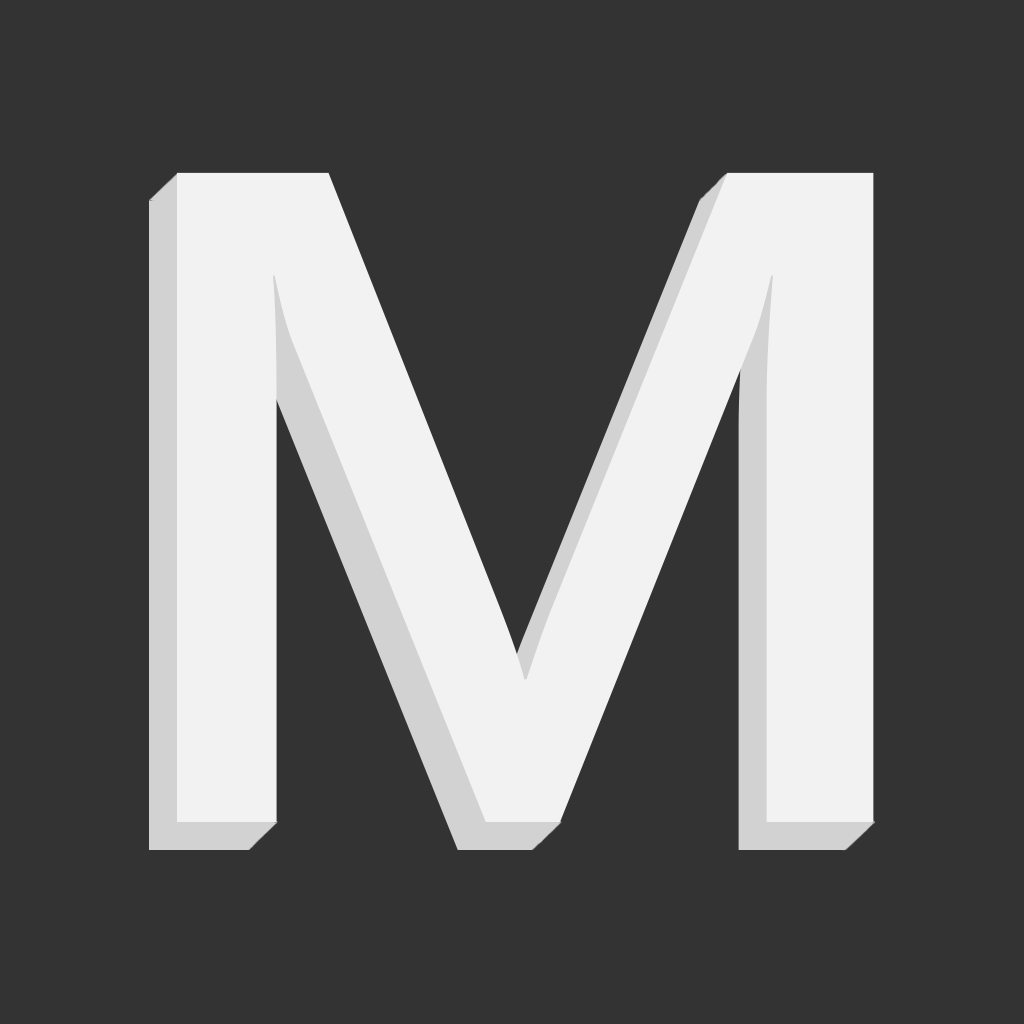
<style>
.page{position:relative;width:1024px;height:1024px;background:#333333}
.page>*{position:absolute;margin:0}
.t1{font:927.2px "SegoeUI-Semibold";letter-spacing:0.004em;color:#f2f2f2}
</style>
<div class="page">
<p class="t1" style="left:177px;top:172px;width:697px;height:650px">M</p>
<p class="t1" style="left:149px;top:200px;width:697px;height:650px">M</p>
</div>
